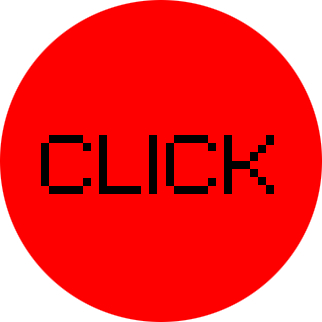
<style>
.page{position:relative;width:322px;height:322px;background:#ff0000}
.page>*{position:absolute;margin:0}
.t1{font:66.7px "PixelFJ8pt1Normal";color:#000000}
</style>
<div class="page">
<p class="t1" style="left:41px;top:135px;width:233px;height:59px">CLICK</p>
</div>
